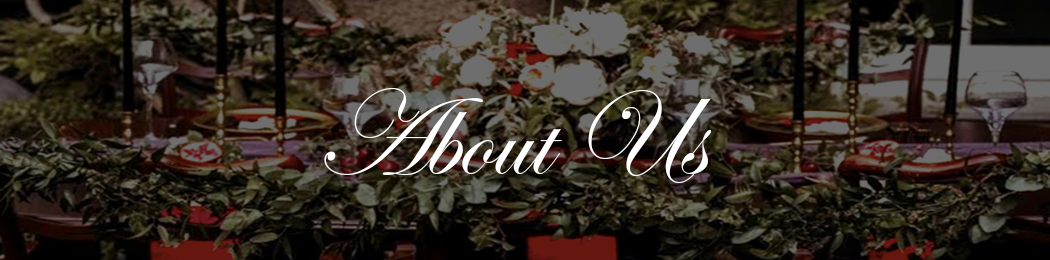
<style>
.page{position:relative;width:1050px;height:260px}
.page>*{position:absolute;margin:0}
.t1{font:123px "EdwardianScriptITC";color:#ffffff}
</style>
<div class="page">
<p class="t1" style="left:324px;top:88px;width:387px;height:95px">About Us</p>
</div>
